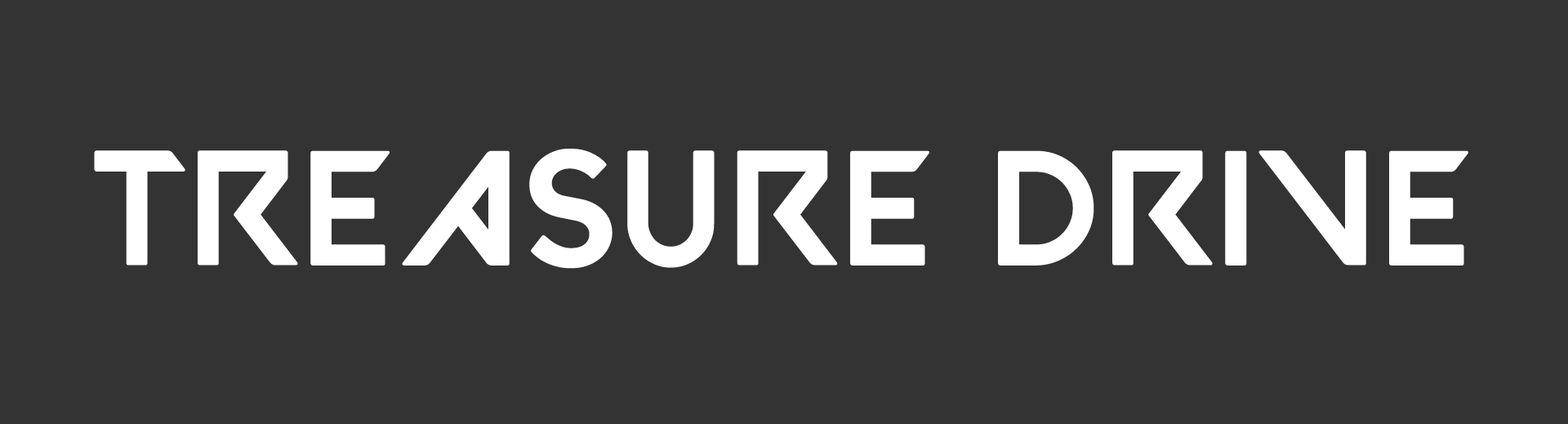
<style>
.page{position:relative;width:1568px;height:424px;background:#333333}
.page>*{position:absolute;margin:0}
.t1{font:163.3px "VALORANT-Regular";color:#ffffff;text-transform:uppercase}
</style>
<div class="page">
<p class="t1" style="left:94px;top:149px;width:1374px;height:120px">tREASURE DRIVE</p>
</div>
